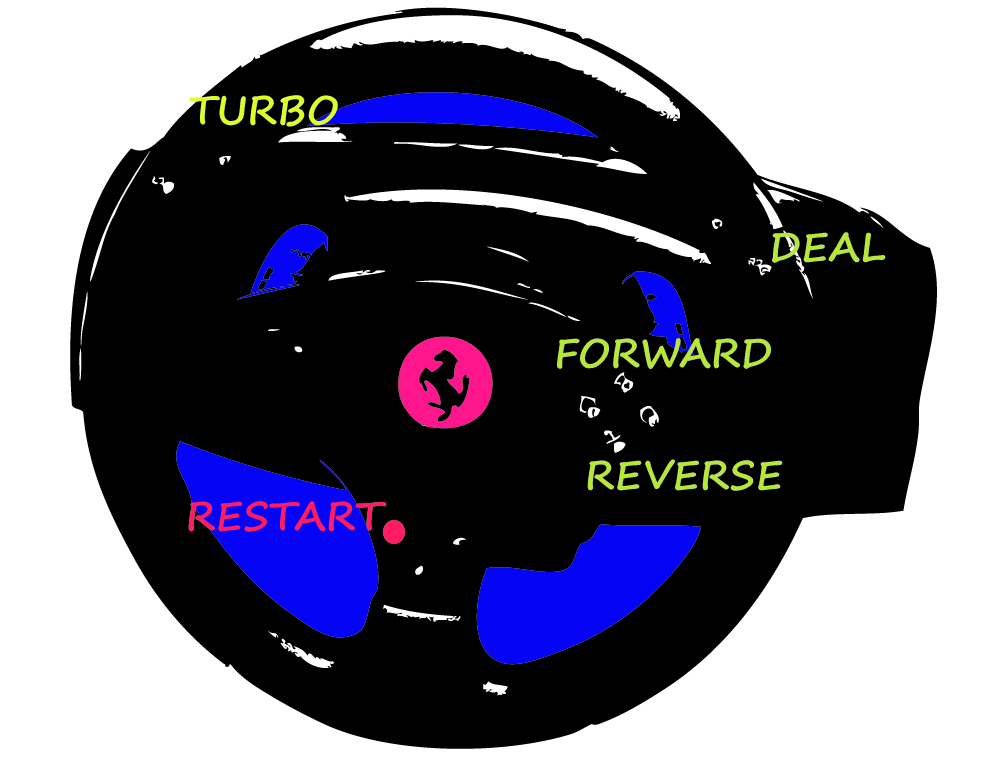
<style>
.page{position:relative;width:1008px;height:762px;background:#000000}
.page>*{position:absolute;margin:0}
.t1{font:40px "SegoePrint-Bold";letter-spacing:0.01em;color:#ddff26}
.t2{font:40px "SegoePrint-Bold";letter-spacing:0.01em;color:#b6e937}
.t3{font:40px "SegoePrint-Bold";letter-spacing:0.01em;color:#ff1c63}
</style>
<div class="page">
<p class="t1" style="left:189px;top:95px;width:149px;height:32px">TURBO</p>
<p class="t2" style="left:772px;top:232px;width:114px;height:31px">DEAL</p>
<p class="t2" style="left:557px;top:338px;width:214px;height:31px">FORWARD</p>
<p class="t2" style="left:587px;top:459px;width:196px;height:32px">REVERSE</p>
<p class="t3" style="left:188px;top:501px;width:199px;height:31px">RESTART</p>
</div>
